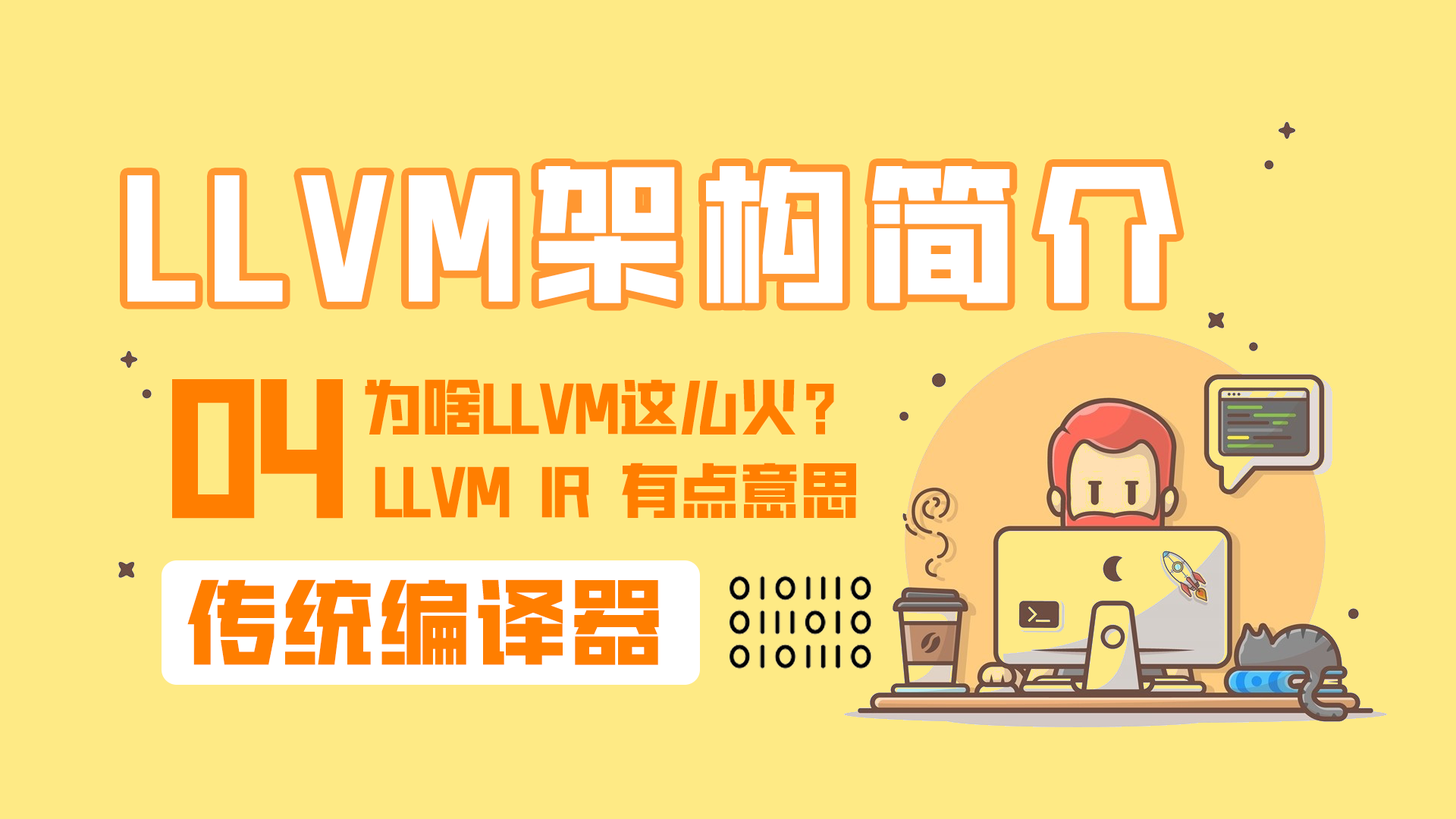
<style>
.page{position:relative;width:1456px;height:819px;background:#feea85}
.page>*{position:absolute;margin:0}
.t1{font:151.7px "HGGTZHVF-Medium";letter-spacing:0.1em;color:#ffffff}
.t2{font:166.8px "HGGTZHVF-Medium";letter-spacing:-0.01em;color:#ff7e00}
.t3{font:60.7px "HGGTZHVF-Medium";letter-spacing:-0.01em;color:#ff7e00;font-weight:bold}
.t4{font:93.8px "HGGTZHVF-Medium";letter-spacing:0.025em;color:#ff7e00;font-weight:bold}
</style>
<div class="page">
<p class="t1" style="left:127px;top:166px;width:1050px;height:137px">LLVM架构简介</p>
<p class="t2" style="left:172px;top:379px;width:171px;height:140px">04</p>
<p class="t3" style="left:365px;top:379px;width:469px;height:56px">为啥LLVM这么火？</p>
<p class="t3" style="left:375px;top:463px;width:481px;height:55px">LLVM IR 有点意思</p>
<p class="t4" style="left:187px;top:579px;width:472px;height:86px">传统编译器</p>
</div>
